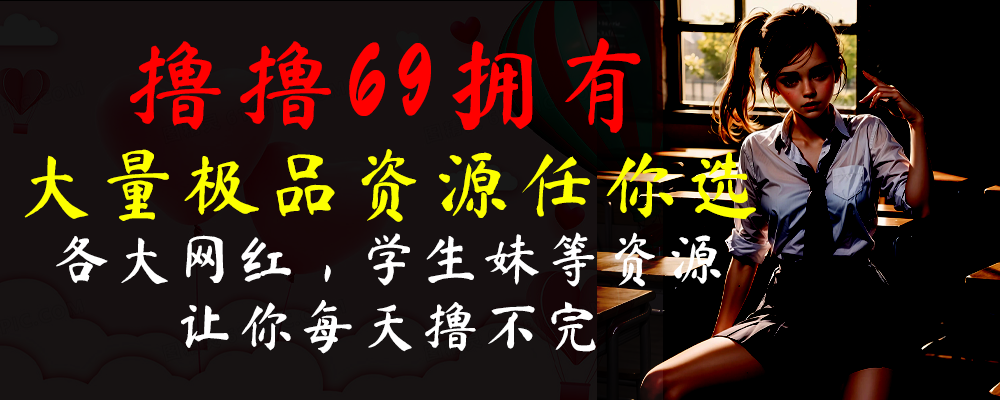
<style>
.page{position:relative;width:1000px;height:400px;background:#161011}
.page>*{position:absolute;margin:0}
.t1{font:55.9px "MaShanZheng-Regular";letter-spacing:0.1em;color:#ffffff}
.t2{font:100.3px "MaShanZheng-Regular";letter-spacing:0.1em;color:#ff0000}
.t3{font:76.1px "MaShanZheng-Regular";letter-spacing:0.1em;color:#fcff00}
</style>
<div class="page">
<p class="t1" style="left:24px;top:38px;width:732px;height:316px;text-align:center"><span class="t2">撸撸69拥有<br></span><span class="t3">大量极品资源任你选<br></span>各大网红，学生妹等资源<br>让你每天撸不完</p>
</div>
